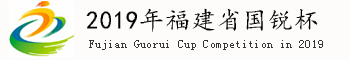
<style>
.page{position:relative;width:350px;height:60px;background:#fefbfb}
.page>*{position:absolute;margin:0}
.t1{font:25px "¿¬Ìå";letter-spacing:0.03em;color:#050000}
.t2{font:12px "SimSun";letter-spacing:0.03em;color:#393434}
</style>
<div class="page">
<p class="t1" style="left:86px;top:8px;width:232px;height:24px">2019年福建省国锐杯</p>
<p class="t2" style="left:89px;top:40px;width:234px;height:10px">Fujian Guorui Cup Competition in 2019</p>
</div>
